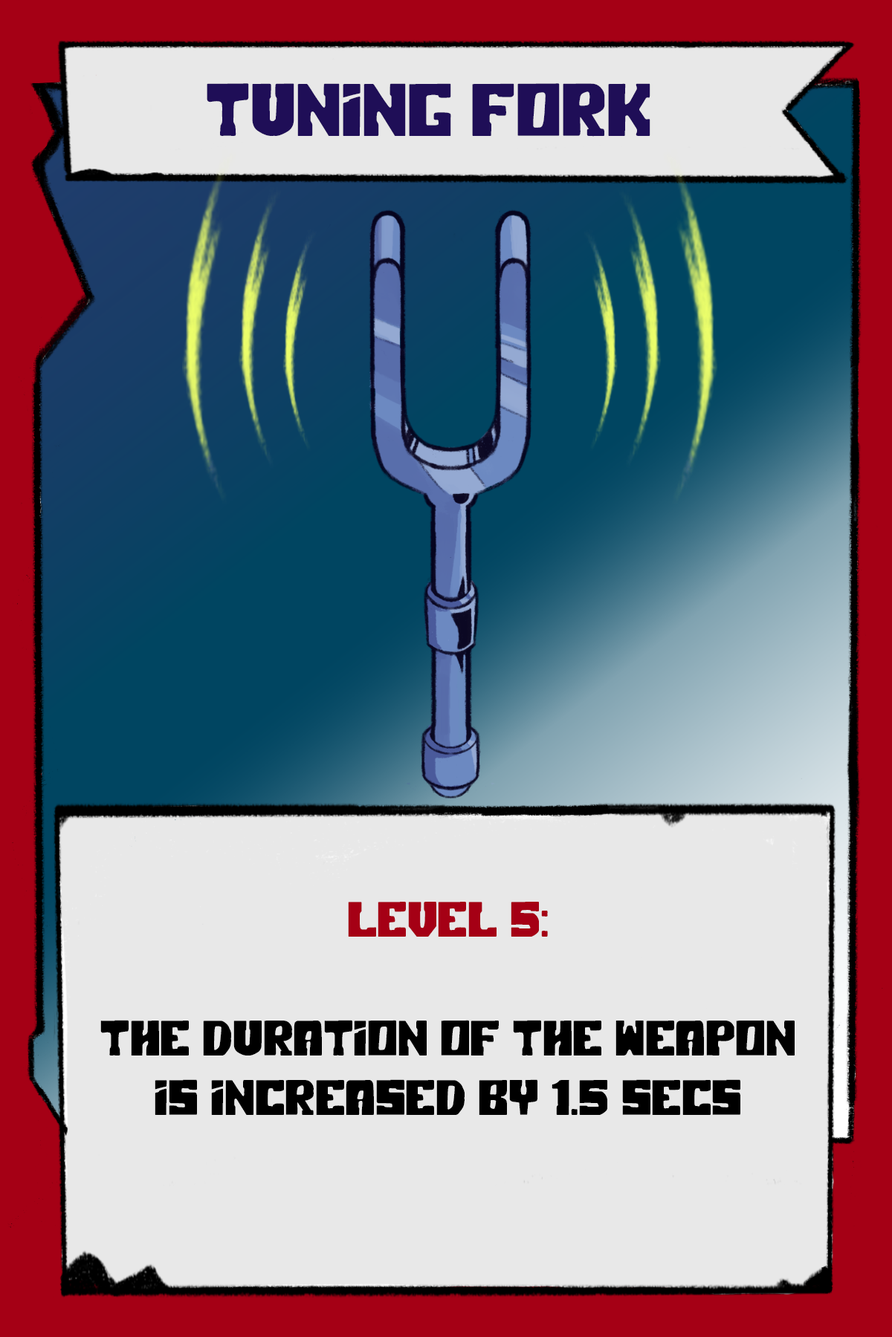
<style>
.page{position:relative;width:892px;height:1337px;background:#e8e8e8}
.page>*{position:absolute;margin:0}
.t1{font:74.3px "PolarPress";color:#1f0e57}
.t2{font:49.5px "PolarPress";color:#000000}
.t3{font:49.5px "PolarPress";color:#a50015}
</style>
<div class="page">
<p class="t1" style="left:207px;top:83px;width:443px;height:54px">TUNING FORK</p>
<p class="t2" style="left:100px;top:902px;width:694px;height:213px;text-align:center"><span class="t3">LEVEL 5:<br><br></span>The duration of the weapon is increased by 1.5 secs</p>
</div>
